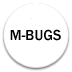
<style>
.page{position:relative;width:72px;height:72px;background:#ffffff}
.page>*{position:absolute;margin:0}
.t1{font:15px "FranklinGothic-Medium";color:#000000}
</style>
<div class="page">
<p class="t1" style="left:10px;top:29px;width:51px;height:12px">M-BUGS</p>
</div>
